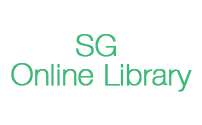
<style>
.page{position:relative;width:202px;height:125px;background:#ffffff}
.page>*{position:absolute;margin:0}
.t1{font:30px/29px "HelveticaNeueLT-Thin";color:#3cb878;font-weight:bold}
</style>
<div class="page">
<p class="t1" style="left:11px;top:34px;width:181px;height:58px;text-align:center">SG <br>Online Library</p>
</div>
